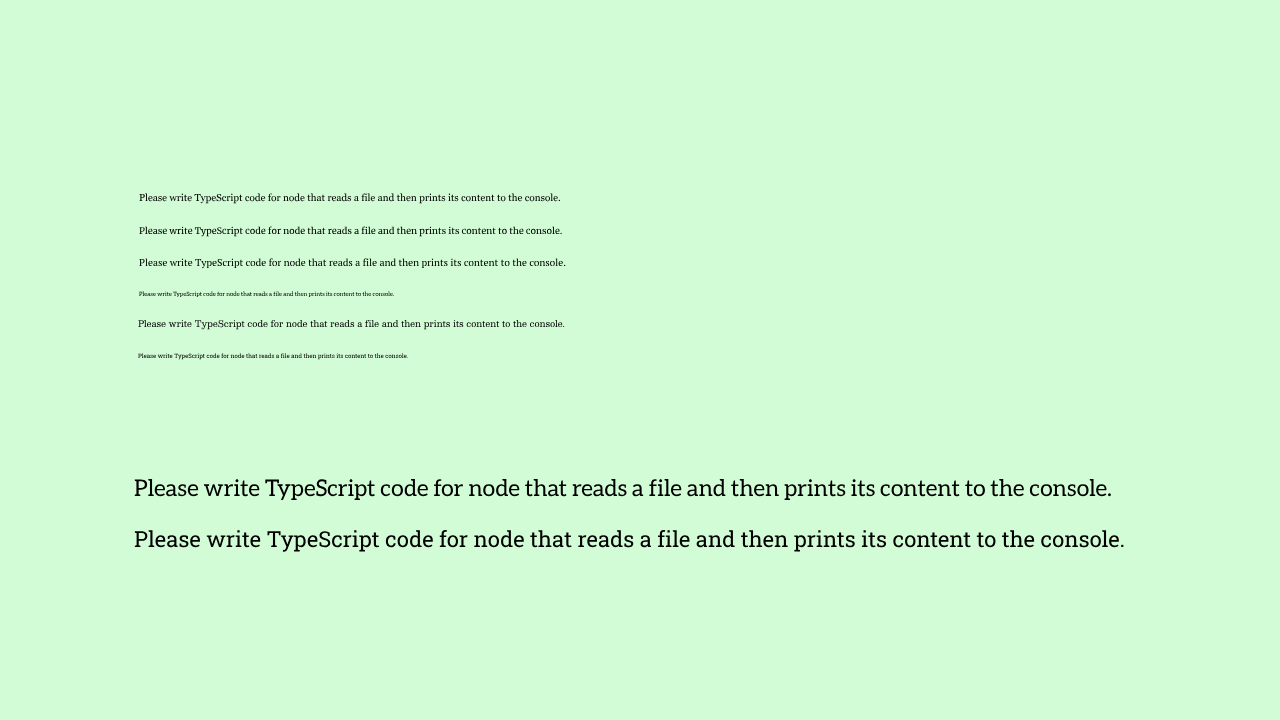
<style>
.page{position:relative;width:1280px;height:720px;background:#d2fcd5}
.page>*{position:absolute;margin:0}
.t1{font:10px "Georgia";color:#000000}
.t2{font:9px "Merriweather-Regular";color:#000000}
.t3{font:10px "PTSerif-Regular";color:#000000}
.t4{font:6px "Aleo-Regular"}
.t5{font:9px "Besley-Regular";color:#000000}
.t6{font:6px "RobotoSlab-Regular"}
.t7{font:23px "Aleo-Regular";color:#000000}
.t8{font:22px "RobotoSlab-Regular";color:#000000}
</style>
<div class="page">
<p class="t1" style="left:139px;top:193px;width:422px;height:11px">Please write TypeScript code for node that reads a file and then prints its content to the console.</p>
<p class="t2" style="left:139px;top:226px;width:423px;height:11px">Please write TypeScript code for node that reads a file and then prints its content to the console.</p>
<p class="t3" style="left:139px;top:258px;width:427px;height:11px">Please write TypeScript code for node that reads a file and then prints its content to the console.</p>
<p class="t4" style="left:139px;top:291px;width:255px;height:7px">Please write TypeScript code for node that reads a file and then prints its content to the console.</p>
<p class="t5" style="left:138px;top:319px;width:427px;height:11px">Please write TypeScript code for node that reads a file and then prints its content to the console.</p>
<p class="t6" style="left:138px;top:353px;width:270px;height:7px">Please write TypeScript code for node that reads a file and then prints its content to the console.</p>
<p class="t7" style="left:134px;top:479px;width:977px;height:21px">Please write TypeScript code for node that reads a file and then prints its content to the console.</p>
<p class="t8" style="left:134px;top:530px;width:990px;height:22px">Please write TypeScript code for node that reads a file and then prints its content to the console.</p>
</div>
